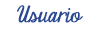
<style>
.page{position:relative;width:100px;height:30px;background:#ffffff}
.page>*{position:absolute;margin:0}
.t1{font:19px "JandaElegantHandwriting";letter-spacing:-0.035em;color:#2b4992;font-weight:bold}
</style>
<div class="page">
<p class="t1" style="left:17px;top:5px;width:66px;height:18px">Usuario</p>
</div>
